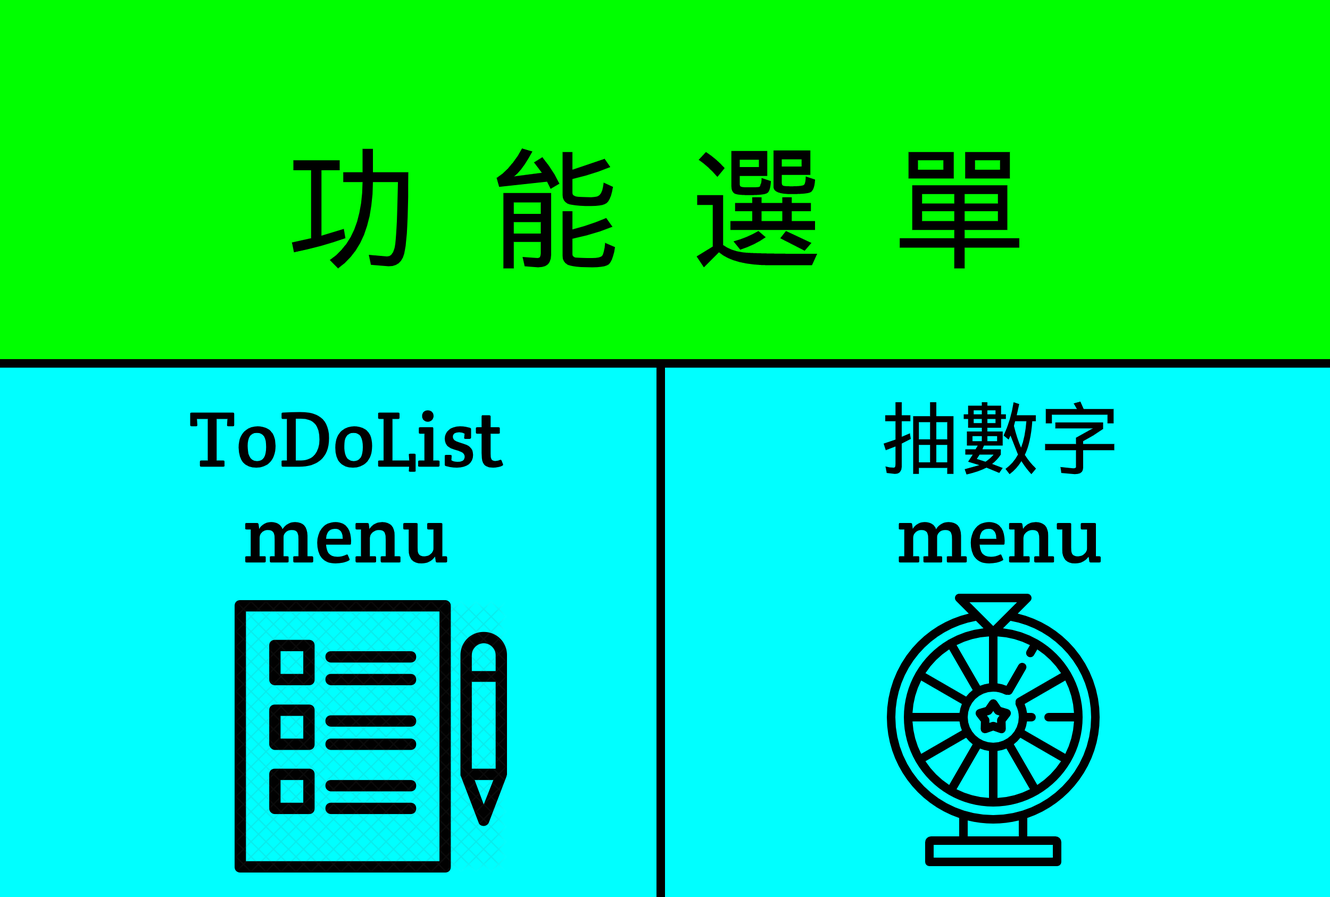
<style>
.page{position:relative;width:1330px;height:897px;background:#00ffff}
.page>*{position:absolute;margin:0}
.t1{font:133px "DroidSansFallback";color:#000000}
.t2{font:79.8px "CreteRound-Regular";color:#000000}
.t3{font:79.8px "DroidSansFallback";color:#000000}
</style>
<div class="page">
<p class="t1" style="left:291px;top:148px;width:728px;height:121px">功  能  選  單</p>
<p class="t2" style="left:883px;top:401px;width:231px;height:163px;text-align:center"><span class="t3">抽數字<br></span>menu</p>
<p class="t2" style="left:190px;top:410px;width:313px;height:154px;text-align:center">ToDoList<br>menu</p>
</div>
